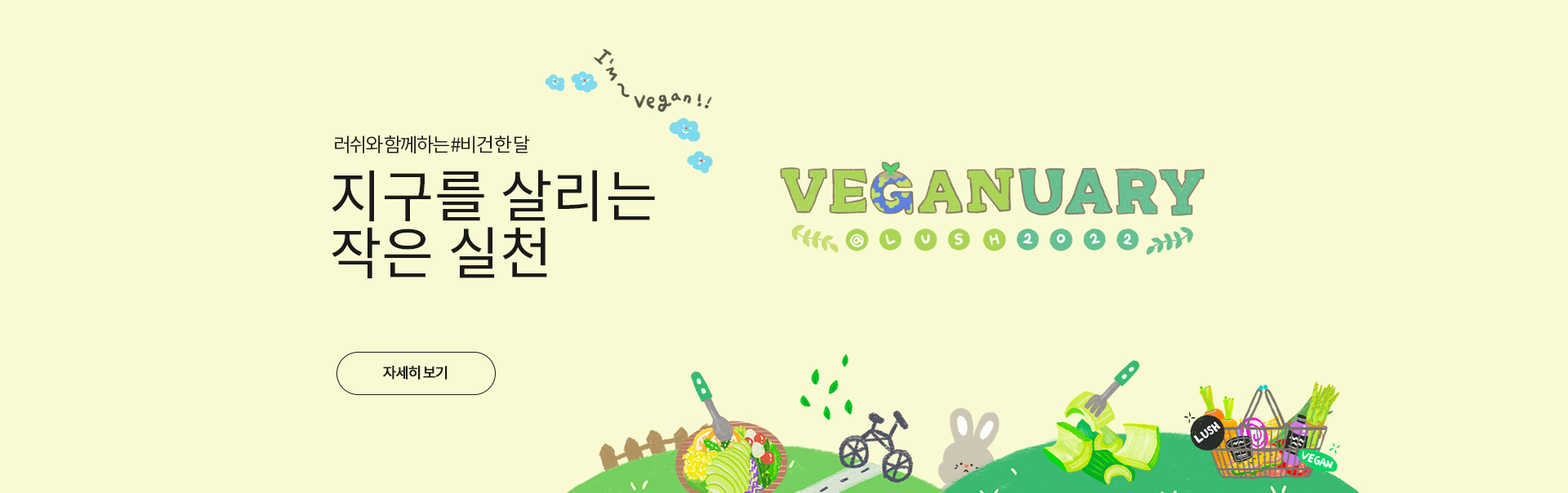
<style>
.page{position:relative;width:1568px;height:493px;background:#f9fad2}
.page>*{position:absolute;margin:0}
.t1{font:19.6px "NotoSansKR-Regular";letter-spacing:-0.1em;color:#191919}
.t2{font:57.2px/57.2px "NotoSansKR-Regular";color:#191919}
.t3{font:14.7px "NotoSansKR-Regular";letter-spacing:-0.1em;color:#191919;font-weight:bold}
</style>
<div class="page">
<p class="t1" style="left:335px;top:136px;width:195px;height:18px">러쉬와 함께하는 #비건 한 달</p>
<p class="t2" style="left:332px;top:170px;width:323px;height:108px">지구를 살리는<br>작은 실천</p>
<p class="t3" style="left:383px;top:366px;width:65px;height:14px">자세히 보기</p>
</div>
